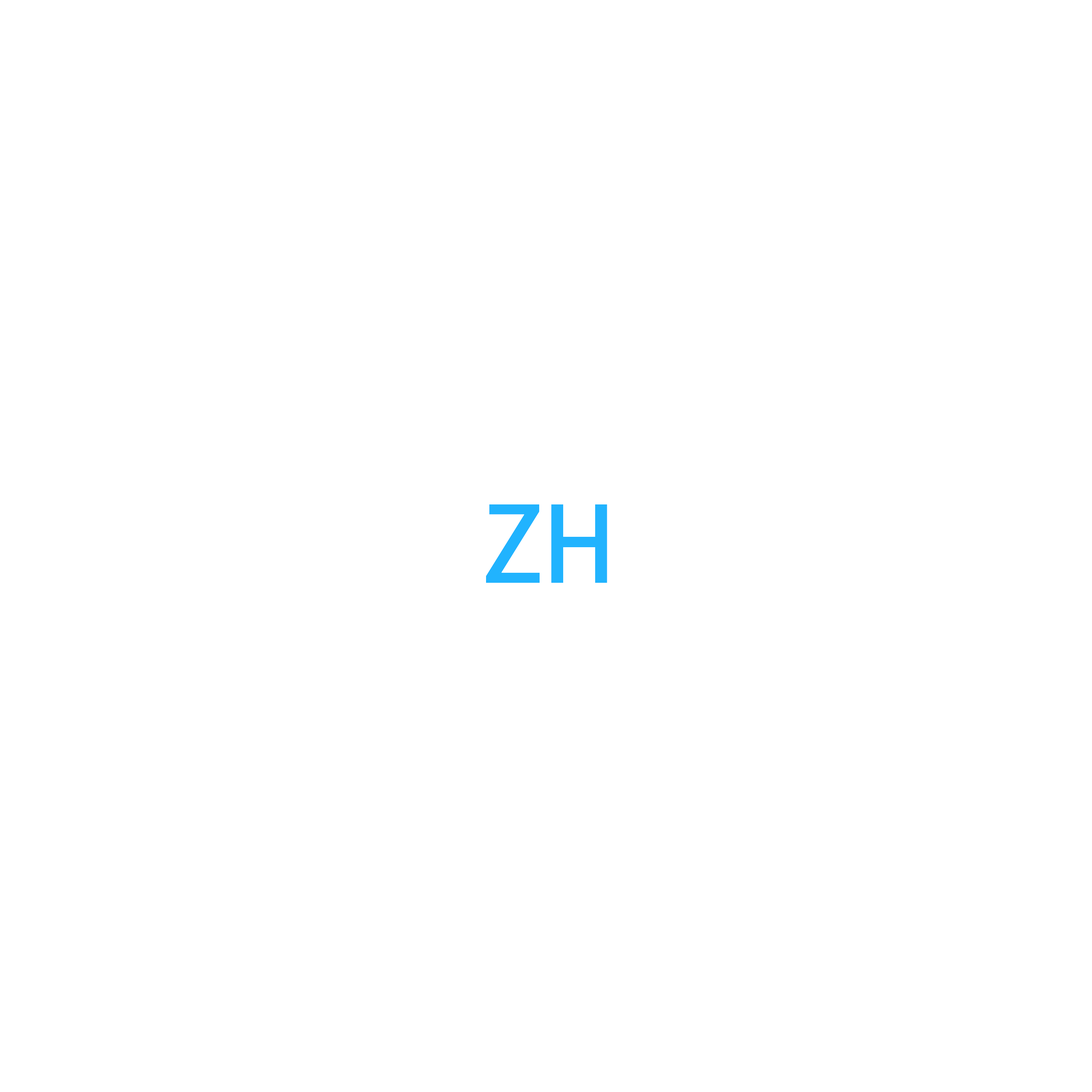
<style>
.page{position:relative;width:1092px;height:1092px;background:#ffffff}
.page>*{position:absolute;margin:0}
.t1{font:102.3px "AdobeHeitiStd-Regular";color:#21b3fe}
</style>
<div class="page">
<p class="t1" style="left:486px;top:504px;width:121px;height:79px">ZH</p>
</div>
